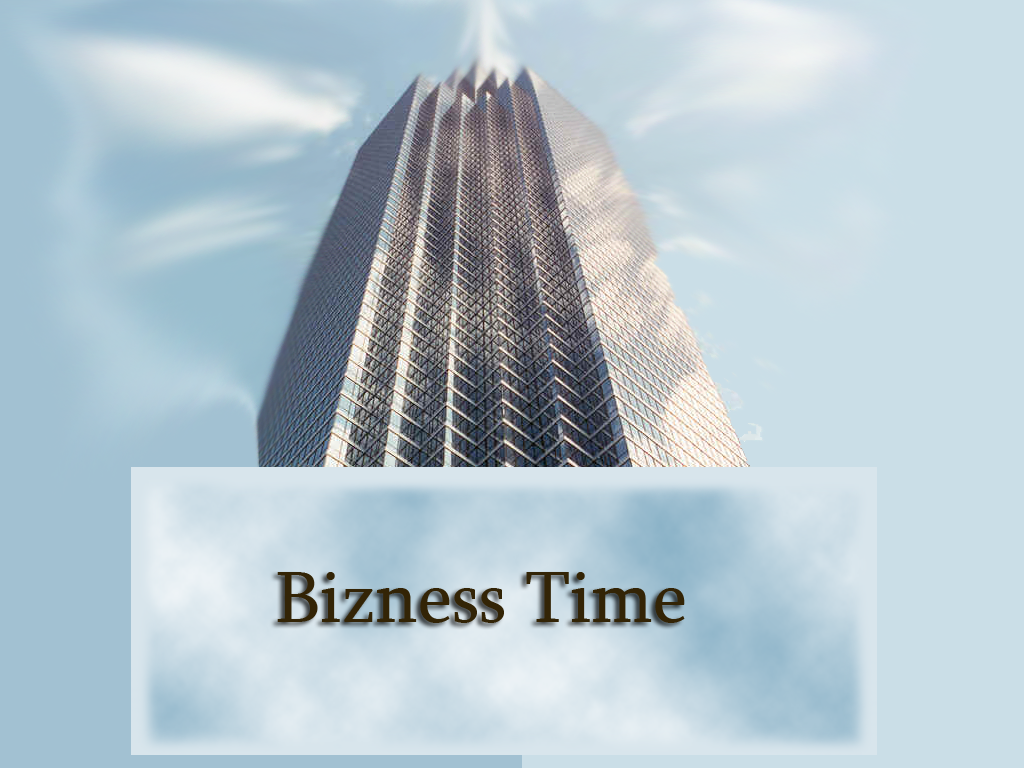
<style>
.page{position:relative;width:1024px;height:768px}
.page>*{position:absolute;margin:0}
.t1{font:75px "Sylfaen";color:#332406}
</style>
<div class="page">
<p class="t1" style="left:277px;top:572px;width:408px;height:51px">Bizness Time</p>
</div>
